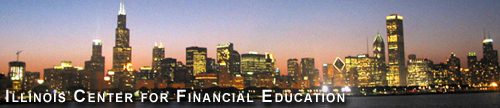
<style>
.page{position:relative;width:500px;height:108px}
.page>*{position:absolute;margin:0}
.t1{font:17.1px "Arial-BoldMT";letter-spacing:0.1em;color:#ffffff;font-variant:small-caps}
</style>
<div class="page">
<p class="t1" style="left:6px;top:89px;width:339px;height:14px">Illinois Center for Financial Education</p>
</div>
